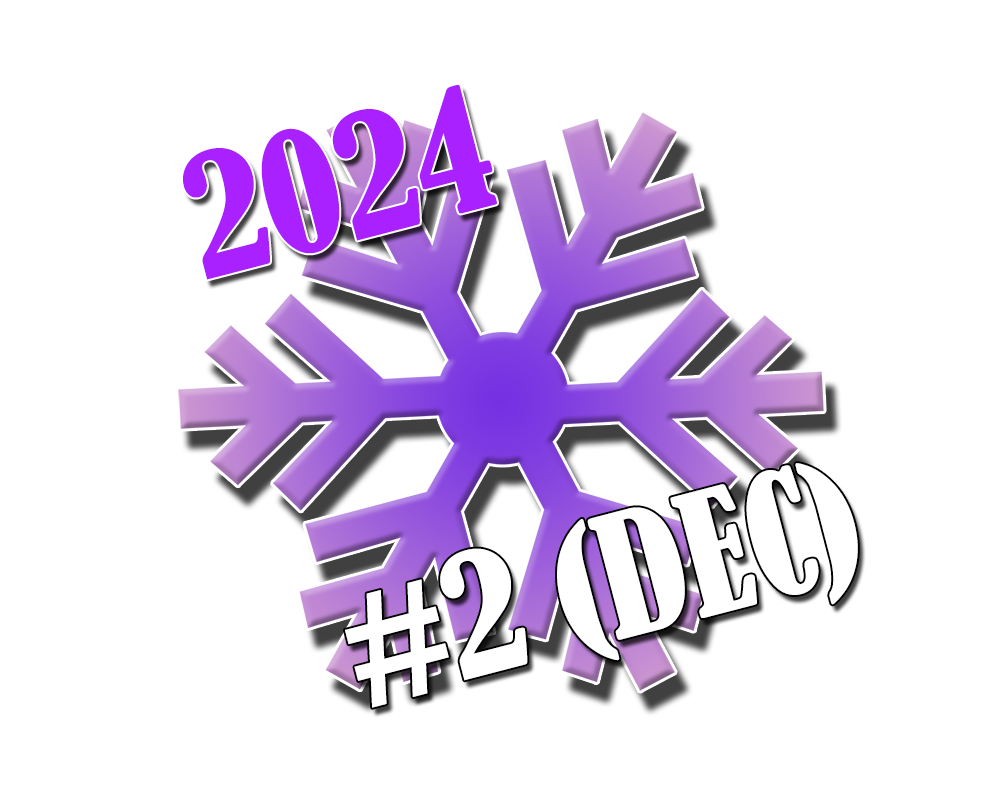
<style>
.page{position:relative;width:1000px;height:800px;background:#ffffff}
.page>*{position:absolute;margin:0}
.t1{font:158.2px "BernardMT-Condensed";color:#aa21ff}
.t2{font:158.2px "BernardMT-Condensed";color:#ffffff}
</style>
<div class="page">
<p class="t1" style="left:183px;top:84px;width:314px;height:196px;rotate:-15deg">2024</p>
<p class="t2" style="left:345px;top:463px;width:513px;height:245px;rotate:-15deg">#2 (DEC)</p>
</div>
